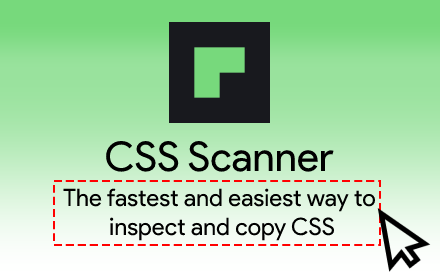
<style>
.page{position:relative;width:440px;height:280px}
.page>*{position:absolute;margin:0}
.t1{font:41px "ProductSans-Regular";color:#000000}
.t2{font:24px "ProductSans-Regular";color:#000000}
</style>
<div class="page">
<p class="t1" style="left:106px;top:140px;width:228px;height:32px">CSS Scanner</p>
<p class="t2" style="left:63px;top:188px;width:313px;height:53px;text-align:center">The fastest and easiest way to <br>inspect and copy CSS</p>
</div>
